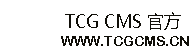
<style>
.page{position:relative;width:194px;height:55px;background:#ffffff}
.page>*{position:absolute;margin:0}
.t1{font:18px "MicrosoftYaHei";color:#100e08;scale:0.96 1}
.t2{font:14px "ArialRoundedMTBold";color:#100e08}
</style>
<div class="page">
<p class="t1" style="left:65px;top:12px;width:116px;height:18px">TCG CMS 官方</p>
<p class="t2" style="left:61px;top:36px;width:128px;height:10px">WWW.TCGCMS.CN</p>
</div>
